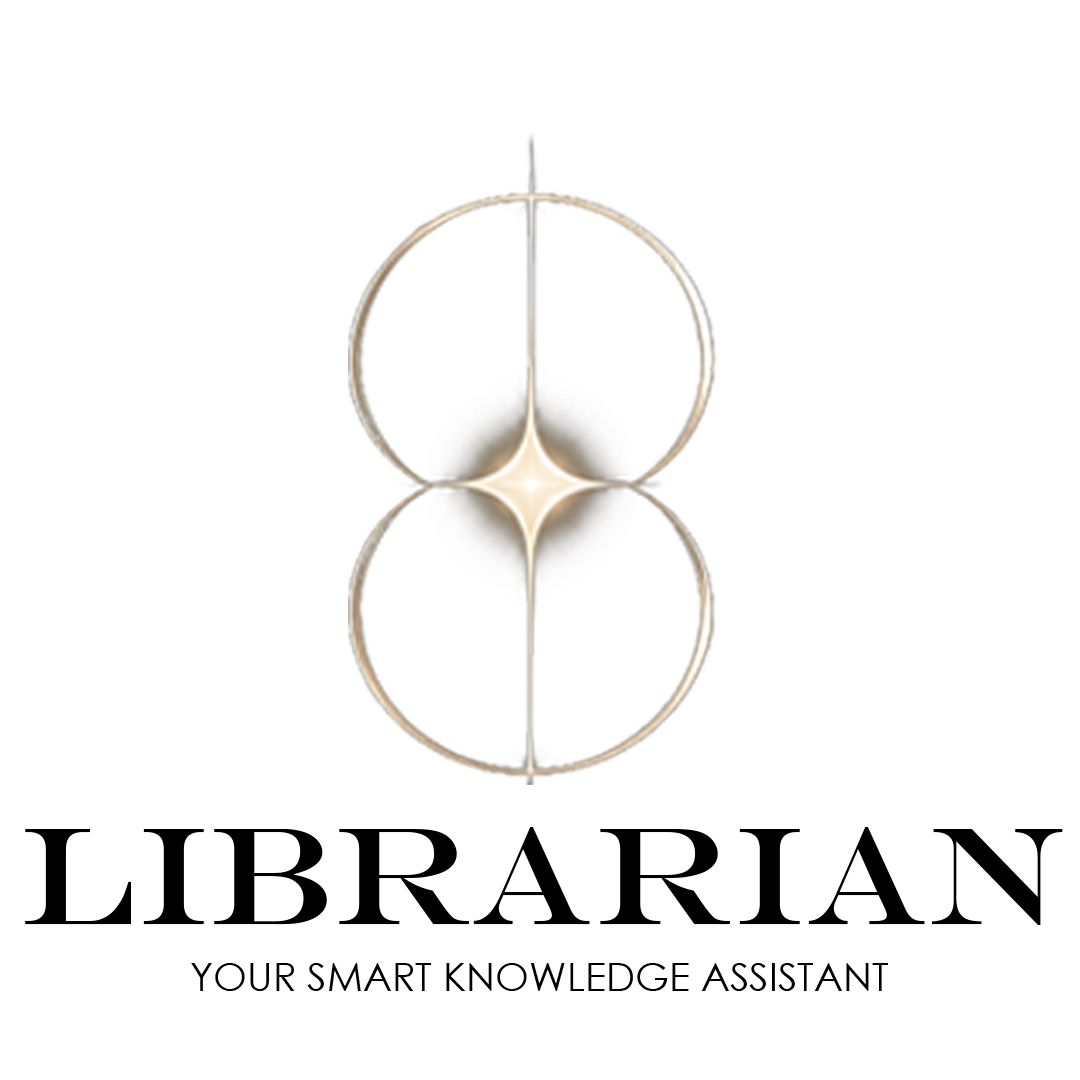
<style>
.page{position:relative;width:1080px;height:1080px;background:#ffffff}
.page>*{position:absolute;margin:0}
.t1{font:139.4px "EngraversMT";color:#000000}
.t2{font:39.1px "CenturyGothic";color:#000000}
</style>
<div class="page">
<p class="t1" style="left:25px;top:827px;width:1038px;height:98px">LIBRARIAN</p>
<p class="t2" style="left:191px;top:963px;width:697px;height:28px">YOUR SMART KNOWLEDGE ASSISTANT</p>
</div>
